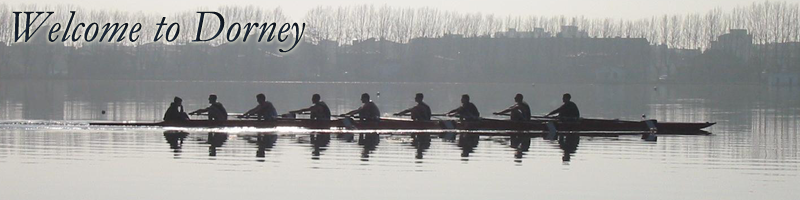
<style>
.page{position:relative;width:800px;height:200px}
.page>*{position:absolute;margin:0}
.t1{font:45.8px "Garamond-Italic";color:#151e2c}
</style>
<div class="page">
<p class="t1" style="left:12px;top:11px;width:294px;height:42px">Welcome to Dorney</p>
</div>
